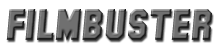
<style>
.page{position:relative;width:216px;height:54px;background:#ffffff}
.page>*{position:absolute;margin:0}
.t1{font:48.4px "SFCollegiateSolid-BoldItalic";color:#707070}
</style>
<div class="page">
<p class="t1" style="left:6px;top:9px;width:206px;height:32px">filmbuster</p>
</div>
